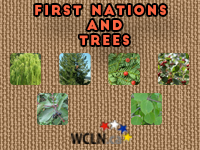
<style>
.page{position:relative;width:200px;height:150px}
.page>*{position:absolute;margin:0}
.t1{font:12.6px "BigJohn";letter-spacing:0.18em;color:#fb6542}
</style>
<div class="page">
<p class="t1" style="left:35px;top:5px;width:131px;height:40px;text-align:center">First nations <br>and<br>trees</p>
</div>
